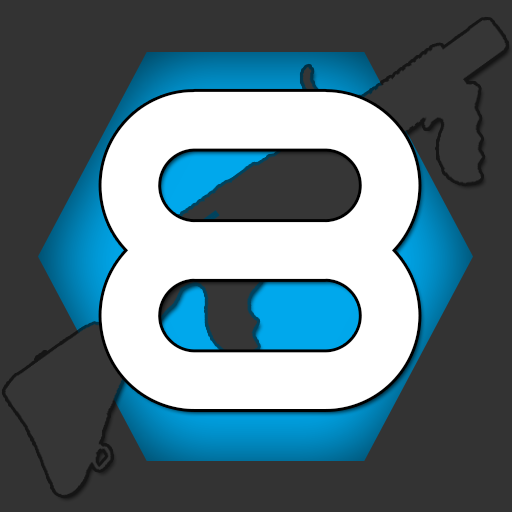
<style>
.page{position:relative;width:512px;height:512px;background:#333333}
.page>*{position:absolute;margin:0}
.t1{font:226.5px "AzonixRegular";color:#ffffff}
</style>
<div class="page">
<p class="t1" style="left:101px;top:91px;width:318px;height:318px">8</p>
</div>
